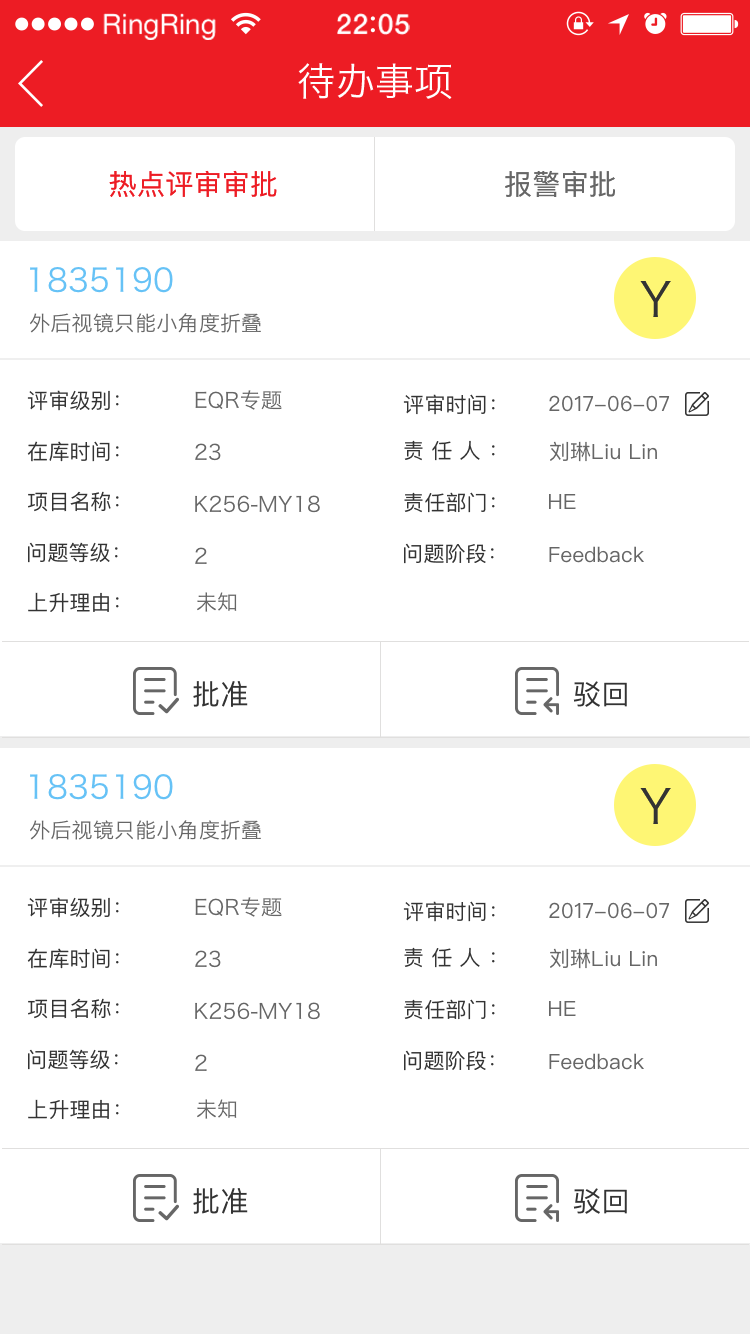
<style>
.page{position:relative;width:750px;height:1334px;background:#ffffff}
.page>*{position:absolute;margin:0}
.t1{font:28.1px "HelveticaNeue";color:#ffffff}
.t2{font:28.1px "HelveticaNeue-Medium";letter-spacing:0.03em;color:#ffffff}
.t3{font:38.7px "HiraginoSansGB-W3";letter-spacing:0.01em;color:#ffffff}
.t4{font:28px "PingFang-SC-Medium";letter-spacing:0.01em;color:#ed1c24}
.t5{font:28px "PingFang-SC-Medium";letter-spacing:0.01em;color:#666666}
.t6{font:32px "HiraginoSansGB-W3";letter-spacing:0.01em;color:#66c2f6}
.t7{font:45.8px "HiraginoSansGB-W3";letter-spacing:0.01em;color:#333333}
.t8{font:21px "HiraginoSansGB-W3";letter-spacing:0.01em;color:#666666}
.t9{font:21px "PingFangSC-Regular";letter-spacing:0.01em;color:#333333}
.t10{font:21px "PingFangSC-Regular";letter-spacing:0.01em;color:#666666}
.t11{font:21px "PingFangSC-Regular";letter-spacing:0.35em;color:#333333}
.t12{font:28px "PingFangSC-Regular";letter-spacing:0.01em;color:#333333}
</style>
<div class="page">
<p class="t1" style="left:103px;top:13px;width:113px;height:27px">RingRing</p>
<p class="t2" style="left:337px;top:13px;width:73px;height:22px">22 05</p>
<p class="t3" style="left:298px;top:63px;width:154px;height:36px">待办事项</p>
<p class="t4" style="left:109px;top:170px;width:168px;height:27px">热点评审审批</p>
<p class="t5" style="left:505px;top:170px;width:110px;height:27px">报警审批</p>
<p class="t6" style="left:30px;top:267px;width:143px;height:26px">1835190</p>
<p class="t7" style="left:640px;top:281px;width:31px;height:36px">Y</p>
<p class="t8" style="left:30px;top:313px;width:231px;height:20px">外后视镜只能小角度折叠</p>
<p class="t9" style="left:27px;top:390px;width:92px;height:21px">评审级别：</p>
<p class="t8" style="left:195px;top:390px;width:87px;height:20px">EQR专题</p>
<p class="t9" style="left:403px;top:394px;width:92px;height:21px">评审时间：</p>
<p class="t10" style="left:549px;top:395px;width:121px;height:17px">2017-06-07</p>
<p class="t9" style="left:27px;top:441px;width:92px;height:21px">在库时间：</p>
<p class="t8" style="left:195px;top:443px;width:26px;height:18px">23</p>
<p class="t11" style="left:404px;top:440px;width:91px;height:21px">责任人：</p>
<p class="t10" style="left:550px;top:441px;width:107px;height:21px">刘琳Liu Lin</p>
<p class="t9" style="left:28px;top:491px;width:91px;height:21px">项目名称：</p>
<p class="t8" style="left:195px;top:495px;width:125px;height:18px">K256-MY18</p>
<p class="t9" style="left:404px;top:492px;width:91px;height:21px">责任部门：</p>
<p class="t10" style="left:549px;top:494px;width:27px;height:15px">HE</p>
<p class="t9" style="left:28px;top:542px;width:90px;height:21px">问题等级：</p>
<p class="t9" style="left:404px;top:543px;width:90px;height:21px">问题阶段：</p>
<p class="t8" style="left:195px;top:547px;width:12px;height:17px">2</p>
<p class="t10" style="left:549px;top:546px;width:95px;height:17px">Feedback</p>
<p class="t9" style="left:28px;top:592px;width:91px;height:21px">上升理由：</p>
<p class="t8" style="left:197px;top:592px;width:40px;height:20px">未知</p>
<p class="t12" style="left:193px;top:681px;width:55px;height:26px">批准</p>
<p class="t12" style="left:573px;top:681px;width:54px;height:26px">驳回</p>
<p class="t6" style="left:30px;top:774px;width:143px;height:26px">1835190</p>
<p class="t7" style="left:640px;top:788px;width:31px;height:36px">Y</p>
<p class="t8" style="left:30px;top:820px;width:231px;height:20px">外后视镜只能小角度折叠</p>
<p class="t9" style="left:27px;top:897px;width:92px;height:21px">评审级别：</p>
<p class="t8" style="left:195px;top:897px;width:87px;height:20px">EQR专题</p>
<p class="t9" style="left:403px;top:901px;width:92px;height:21px">评审时间：</p>
<p class="t10" style="left:549px;top:902px;width:121px;height:17px">2017-06-07</p>
<p class="t9" style="left:27px;top:948px;width:92px;height:21px">在库时间：</p>
<p class="t8" style="left:195px;top:950px;width:26px;height:18px">23</p>
<p class="t11" style="left:404px;top:947px;width:91px;height:21px">责任人：</p>
<p class="t10" style="left:550px;top:948px;width:107px;height:21px">刘琳Liu Lin</p>
<p class="t9" style="left:28px;top:998px;width:91px;height:21px">项目名称：</p>
<p class="t9" style="left:404px;top:999px;width:91px;height:21px">责任部门：</p>
<p class="t10" style="left:549px;top:1001px;width:27px;height:15px">HE</p>
<p class="t8" style="left:195px;top:1002px;width:125px;height:18px">K256-MY18</p>
<p class="t9" style="left:28px;top:1049px;width:90px;height:21px">问题等级：</p>
<p class="t8" style="left:195px;top:1054px;width:12px;height:17px">2</p>
<p class="t9" style="left:404px;top:1050px;width:90px;height:21px">问题阶段：</p>
<p class="t10" style="left:549px;top:1053px;width:95px;height:17px">Feedback</p>
<p class="t9" style="left:28px;top:1099px;width:91px;height:21px">上升理由：</p>
<p class="t8" style="left:197px;top:1099px;width:40px;height:20px">未知</p>
<p class="t12" style="left:193px;top:1188px;width:55px;height:26px">批准</p>
<p class="t12" style="left:573px;top:1188px;width:54px;height:26px">驳回</p>
</div>
